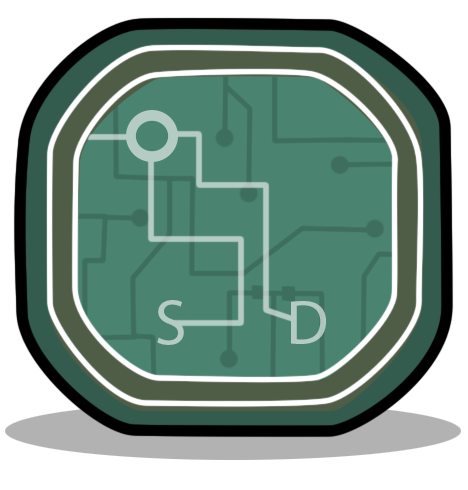
<style>
.page{position:relative;width:468px;height:490px;background:#4a8470}
.page>*{position:absolute;margin:0}
.t1{font:64px "MyriadPro-Regular";color:#b4ccc4}
</style>
<div class="page">
<p class="t1" style="left:157px;top:300px;width:27px;height:45px">S</p>
<p class="t1" style="left:291px;top:301px;width:35px;height:43px">D</p>
</div>
